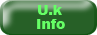
<style>
.page{position:relative;width:97px;height:35px;background:#276027}
.page>*{position:absolute;margin:0}
.t1{font:14px "Arial-Black";color:#66ff66}
</style>
<div class="page">
<p class="t1" style="left:38px;top:5px;width:24px;height:10px">U.k</p>
<p class="t1" style="left:37px;top:19px;width:28px;height:10px">Info</p>
</div>
